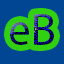
<style>
.page{position:relative;width:64px;height:64px;background:#014693}
.page>*{position:absolute;margin:0}
.t1{font:45.6px "MyriadPro-Regular"}
</style>
<div class="page">
<p class="t1" style="left:10px;top:14px;width:44px;height:31px">eB</p>
</div>
